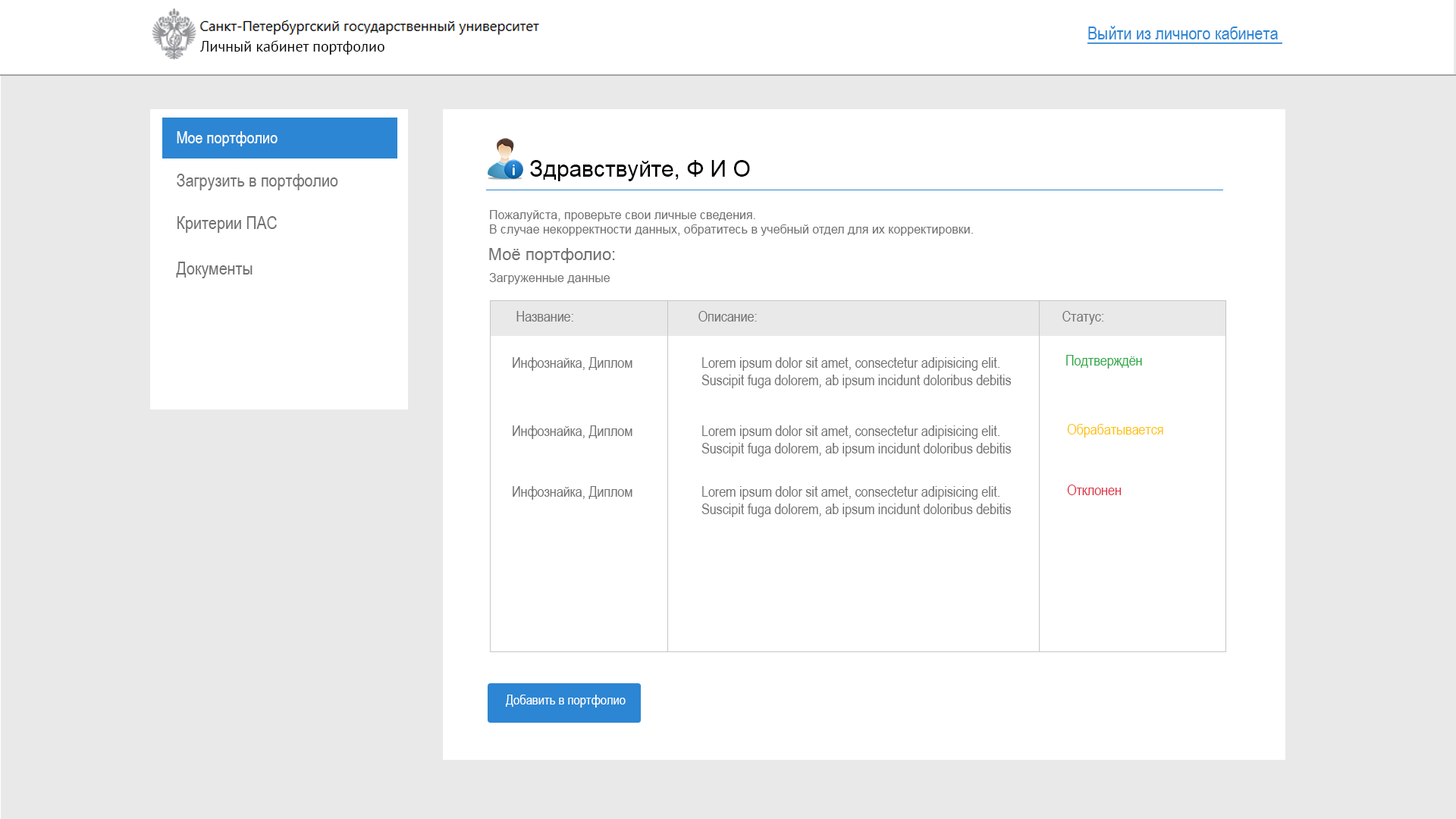
<style>
.page{position:relative;width:1456px;height:819px;background:#ffffff}
.page>*{position:absolute;margin:0}
.t1{font:18.2px "ArialNarrow";color:#2c86d3;text-decoration:underline}
.t2{font:15.2px "PTSans-Regular";color:#060606}
.t3{font:16.7px "ArialNarrow";color:#ffffff}
.t4{font:22.7px "ArialMT";color:#000000}
.t5{font:18.2px "ArialNarrow";color:#727272}
.t6{font:12.1px "ArialMT";color:#727272}
.t7{font:16.7px "ArialMT";color:#727272}
.t8{font:14.8px "ArialNarrow";color:#727272}
.t9{font:14.8px "ArialNarrow";color:#28a745}
.t10{font:14.8px "ArialNarrow";color:#ffc107}
.t11{font:14.8px "ArialNarrow";color:#dc3545}
.t12{font:13.6px "ArialNarrow";color:#ffffff}
</style>
<div class="page">
<p class="t1" style="left:1087px;top:26px;width:195px;height:18px">Выйти из личного кабинета</p>
<p class="t2" style="left:200px;top:40px;width:184px;height:15px">Личный кабинет портфолио</p>
<p class="t3" style="left:177px;top:131px;width:101px;height:15px">Мое портфолио</p>
<p class="t4" style="left:530px;top:160px;width:220px;height:21px">Здравствуйте, Ф И О</p>
<p class="t5" style="left:177px;top:174px;width:161px;height:16px">Загрузить в портфолио</p>
<p class="t5" style="left:177px;top:216px;width:100px;height:17px">Критерии ПАС</p>
<p class="t6" style="left:490px;top:210px;width:483px;height:26px">Пожалуйста, проверьте свои личные сведения.<br>В случае некорректности данных, обратитесь в учебный отдел для их корректировки.</p>
<p class="t7" style="left:489px;top:248px;width:126px;height:15px">Моё портфолио:</p>
<p class="t5" style="left:176px;top:262px;width:77px;height:16px">Документы</p>
<p class="t6" style="left:489px;top:273px;width:121px;height:11px">Загруженные данные</p>
<p class="t8" style="left:516px;top:311px;width:57px;height:11px">Название:</p>
<p class="t8" style="left:698px;top:311px;width:59px;height:11px">Описание:</p>
<p class="t8" style="left:1062px;top:311px;width:41px;height:14px">Статус:</p>
<p class="t8" style="left:513px;top:357px;width:119px;height:14px">Инфознайка, Диплом</p>
<p class="t8" style="left:701px;top:357px;width:311px;height:31px">Lorem ipsum dolor sit amet, consectetur adipisicing elit.<br>Suscipit fuga dolorem, ab ipsum incidunt doloribus debitis</p>
<p class="t9" style="left:1066px;top:355px;width:76px;height:14px">Подтверждён</p>
<p class="t8" style="left:513px;top:425px;width:119px;height:14px">Инфознайка, Диплом</p>
<p class="t8" style="left:701px;top:425px;width:311px;height:32px">Lorem ipsum dolor sit amet, consectetur adipisicing elit.<br>Suscipit fuga dolorem, ab ipsum incidunt doloribus debitis</p>
<p class="t10" style="left:1067px;top:424px;width:96px;height:14px">Обрабатывается</p>
<p class="t11" style="left:1067px;top:485px;width:55px;height:10px">Отклонен</p>
<p class="t8" style="left:513px;top:486px;width:119px;height:14px">Инфознайка, Диплом</p>
<p class="t8" style="left:701px;top:486px;width:311px;height:31px">Lorem ipsum dolor sit amet, consectetur adipisicing elit.<br>Suscipit fuga dolorem, ab ipsum incidunt doloribus debitis</p>
<p class="t12" style="left:506px;top:695px;width:120px;height:13px">Добавить в портфолио</p>
</div>
